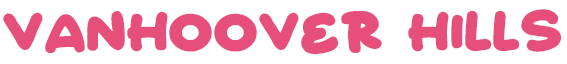
<style>
.page{position:relative;width:567px;height:64px;background:#ffffff}
.page>*{position:absolute;margin:0}
.t1{font:49px "Starborn";color:#e64f7a}
</style>
<div class="page">
<p class="t1" style="left:3px;top:9px;width:558px;height:45px">vAnhOOver hIlls</p>
</div>
